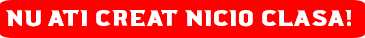
<style>
.page{position:relative;width:365px;height:38px;background:#ff0000}
.page>*{position:absolute;margin:0}
.t1{font:22.5px "Ridgeline201-Regular";color:#ffffff}
</style>
<div class="page">
<p class="t1" style="left:6px;top:10px;width:345px;height:17px">!nu ati creat nicio clasa</p>
</div>
